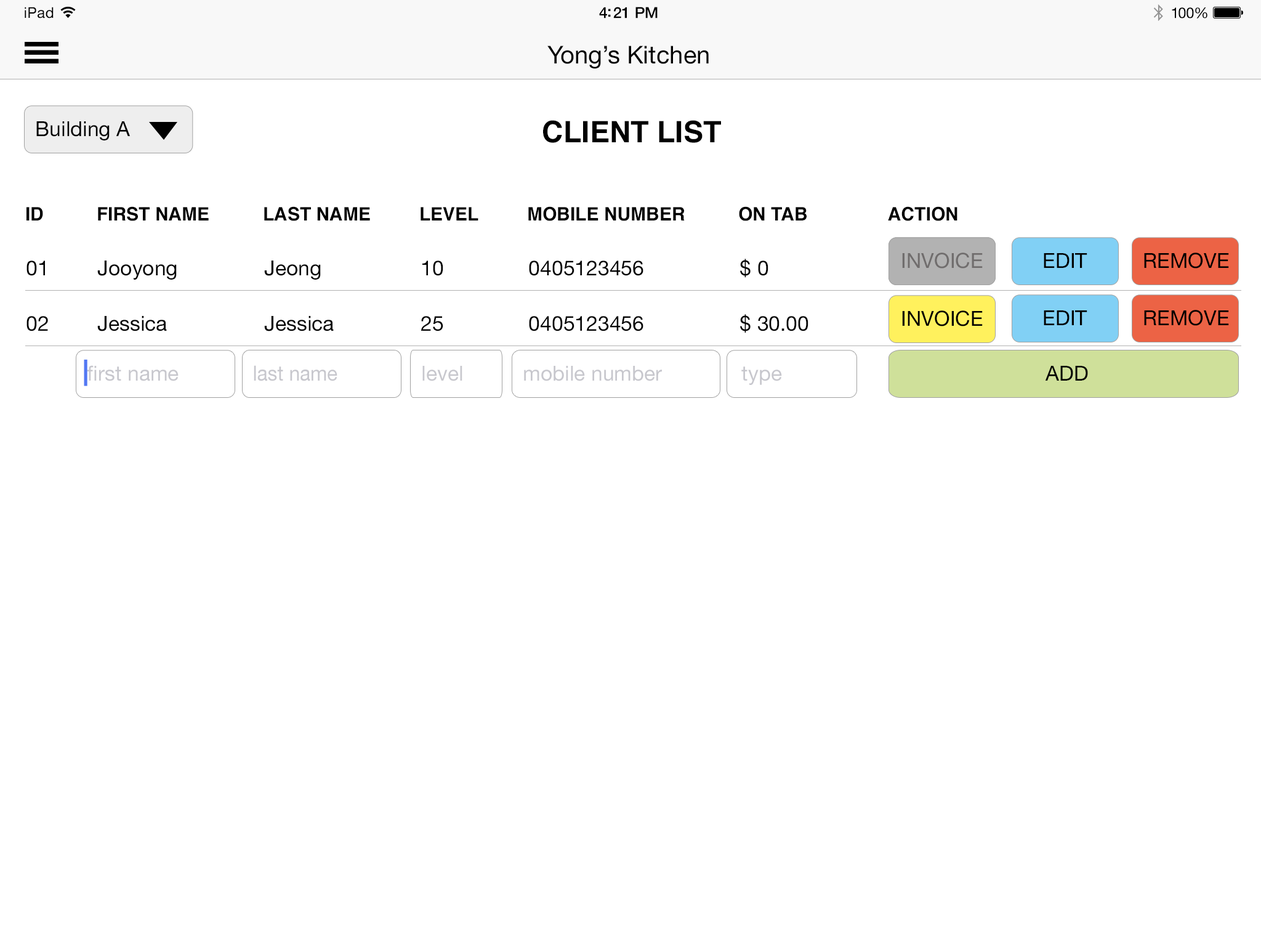
<style>
.page{position:relative;width:1261px;height:946px;background:#ffffff}
.page>*{position:absolute;margin:0}
.t1{font:14.8px "HelveticaNeue";letter-spacing:0.02em;color:#000000}
.t2{font:15.4px "HelveticaNeue-Medium";letter-spacing:-0.02em;color:#000000}
.t3{font:14.8px "HelveticaNeue";letter-spacing:-0.02em;color:#010101}
.t4{font:24.6px "HelveticaNeue";color:#000000}
.t5{font:20.7px "HelveticaNeue";color:#020202}
.t6{font:29.6px "Helvetica-Bold";color:#000000;text-transform:uppercase}
.t7{font:18.5px "Helvetica-Bold";color:#000000;text-transform:uppercase}
.t8{font:20.7px "HelveticaNeue";color:#706d6d;text-transform:uppercase}
.t9{font:20.7px "HelveticaNeue";color:#000000;text-transform:uppercase}
.t10{font:20.7px "HelveticaNeue";color:#000000}
.t11{font:20.7px "HelveticaNeue";color:#c7c7cd}
.t12{font:20.8px "HelveticaNeue";color:#c7c7cd;scale:0.94 1}
</style>
<div class="page">
<p class="t1" style="left:25px;top:7px;width:29px;height:11px">iPad</p>
<p class="t2" style="left:599px;top:7px;width:59px;height:11px">4:21 PM</p>
<p class="t3" style="left:1172px;top:7px;width:35px;height:11px">100%</p>
<p class="t4" style="left:547px;top:46px;width:162px;height:23px">Yong’s Kitchen</p>
<p class="t5" style="left:36px;top:121px;width:94px;height:19px">Building A</p>
<p class="t6" style="left:543px;top:120px;width:178px;height:23px">client list</p>
<p class="t7" style="left:26px;top:207px;width:17px;height:13px">ID</p>
<p class="t7" style="left:98px;top:206px;width:111px;height:15px">First Name</p>
<p class="t7" style="left:264px;top:206px;width:106px;height:15px">Last name</p>
<p class="t7" style="left:421px;top:207px;width:57px;height:13px">level</p>
<p class="t7" style="left:528px;top:206px;width:157px;height:15px">Mobile number</p>
<p class="t7" style="left:739px;top:206px;width:68px;height:15px">on tab</p>
<p class="t7" style="left:888px;top:206px;width:69px;height:15px">action</p>
<p class="t8" style="left:902px;top:252px;width:81px;height:16px">invoice</p>
<p class="t8" style="left:902px;top:252px;width:81px;height:16px">invoice</p>
<p class="t9" style="left:1044px;top:253px;width:43px;height:15px">edit</p>
<p class="t9" style="left:1144px;top:252px;width:85px;height:16px">remove</p>
<p class="t10" style="left:26px;top:260px;width:19px;height:16px">01</p>
<p class="t10" style="left:97px;top:260px;width:80px;height:20px">Jooyong</p>
<p class="t10" style="left:264px;top:260px;width:57px;height:20px">Jeong</p>
<p class="t10" style="left:422px;top:260px;width:21px;height:16px">10</p>
<p class="t10" style="left:529px;top:260px;width:114px;height:16px">0405123456</p>
<p class="t10" style="left:740px;top:259px;width:28px;height:19px">$ 0</p>
<p class="t10" style="left:26px;top:316px;width:22px;height:15px">02</p>
<p class="t10" style="left:97px;top:316px;width:70px;height:15px">Jessica</p>
<p class="t10" style="left:264px;top:316px;width:70px;height:15px">Jessica</p>
<p class="t10" style="left:421px;top:316px;width:22px;height:15px">25</p>
<p class="t10" style="left:529px;top:316px;width:114px;height:15px">0405123456</p>
<p class="t10" style="left:740px;top:314px;width:68px;height:19px">$ 30.00</p>
<p class="t9" style="left:902px;top:310px;width:81px;height:16px">invoice</p>
<p class="t9" style="left:1044px;top:310px;width:43px;height:15px">edit</p>
<p class="t9" style="left:1144px;top:310px;width:85px;height:16px">remove</p>
<p class="t11" style="left:87px;top:365px;width:92px;height:16px">first name</p>
<p class="t12" style="left:254px;top:365px;width:83px;height:16px">last name</p>
<p class="t11" style="left:422px;top:366px;width:40px;height:15px">level</p>
<p class="t11" style="left:524px;top:366px;width:138px;height:15px">mobile number</p>
<p class="t9" style="left:1045px;top:366px;width:43px;height:14px">Add</p>
<p class="t11" style="left:741px;top:366px;width:41px;height:19px">type</p>
</div>
